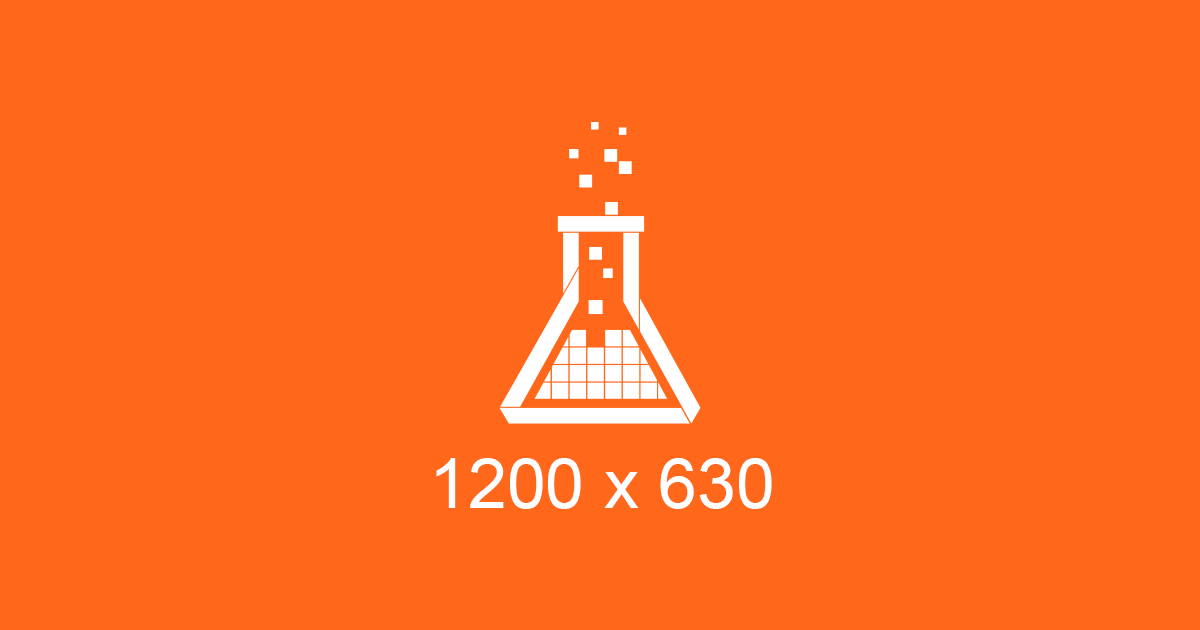
<style>
.page{position:relative;width:1200px;height:630px;background:#ff681b}
.page>*{position:absolute;margin:0}
.t1{font:70px "ArialMT";color:#ffffff}
</style>
<div class="page">
<p class="t1" style="left:436px;top:458px;width:336px;height:51px">1200 x 630</p>
</div>
